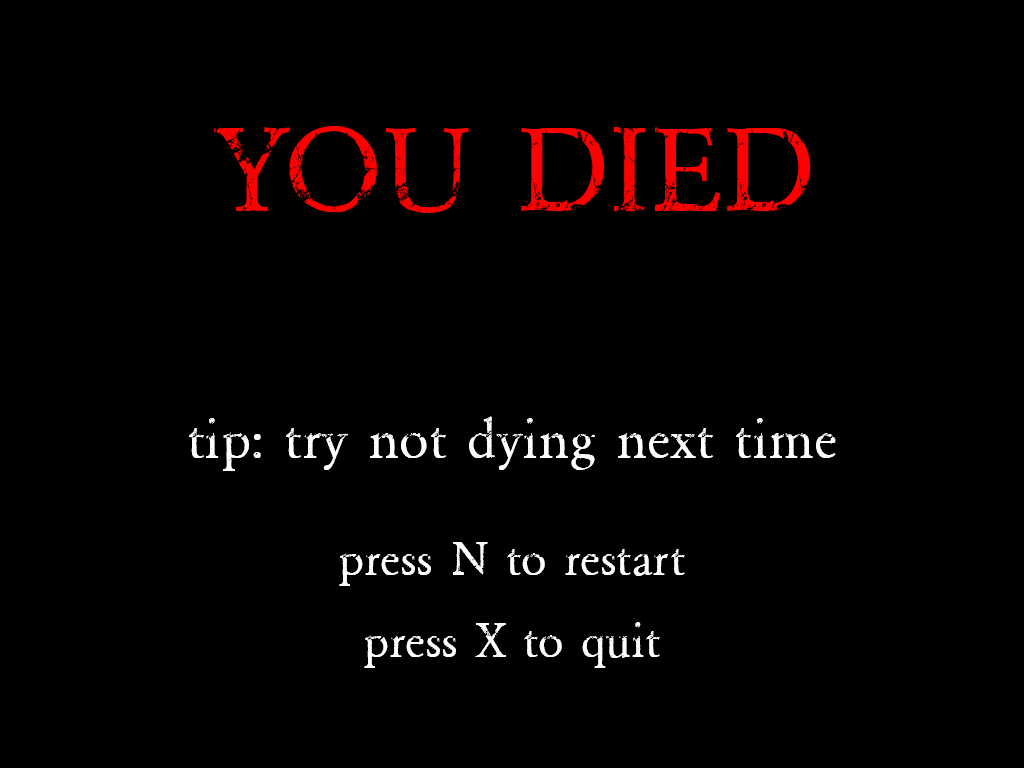
<style>
.page{position:relative;width:1024px;height:768px;background:#000000}
.page>*{position:absolute;margin:0}
.t1{font:125px "NIGHTMAREPILLS";color:#ff0000}
.t2{font:58.3px "NIGHTMAREPILLS";color:#ffffff}
.t3{font:50px "NIGHTMAREPILLS";color:#ffffff}
</style>
<div class="page">
<p class="t1" style="left:214px;top:126px;width:597px;height:87px">YOU DIED</p>
<p class="t2" style="left:189px;top:416px;width:647px;height:55px">tip: try not dying next time</p>
<p class="t3" style="left:339px;top:542px;width:346px;height:44px">press N to restart</p>
<p class="t3" style="left:364px;top:622px;width:296px;height:46px">press X to quit</p>
</div>
